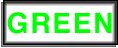
<style>
.page{position:relative;width:118px;height:48px;background:#ffffff}
.page>*{position:absolute;margin:0}
.t1{font:28px "Helvetica-Bold";letter-spacing:0.065em;color:#00ff00}
</style>
<div class="page">
<p class="t1" style="left:7px;top:12px;width:105px;height:22px">GREEN</p>
</div>
